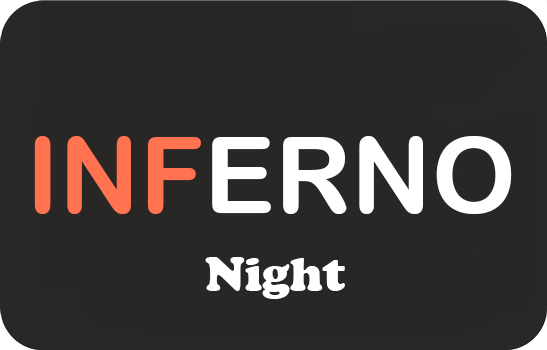
<style>
.page{position:relative;width:547px;height:350px;background:#292726}
.page>*{position:absolute;margin:0}
.t1{font:106.1px "ArialRoundedMTBold";color:#ffffff}
.t2{font:106.1px "ArialRoundedMTBold";color:#ff7350}
.t3{font:48.2px "CooperBlack";color:#ffffff}
</style>
<div class="page">
<p class="t1" style="left:34px;top:136px;width:478px;height:78px"><span class="t2">INF</span>ERNO</p>
<p class="t3" style="left:205px;top:257px;width:140px;height:42px">Night</p>
</div>
